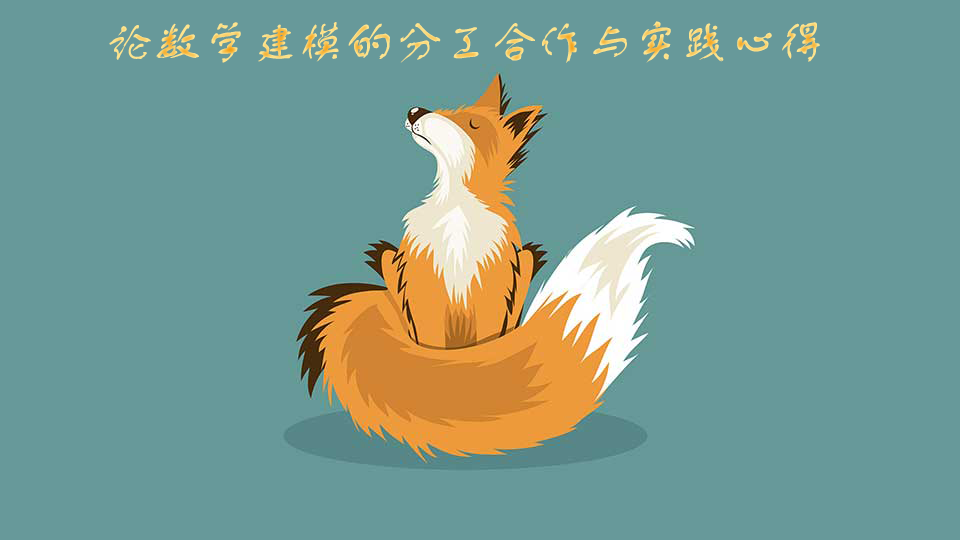
<style>
.page{position:relative;width:960px;height:540px;background:#67999a}
.page>*{position:absolute;margin:0}
.t1{font:48px "FZSTK--GBK1-0"}
</style>
<div class="page">
<p class="t1" style="left:109px;top:21px;width:711px;height:42px">论数学建模的分工合作与实践心得</p>
</div>
